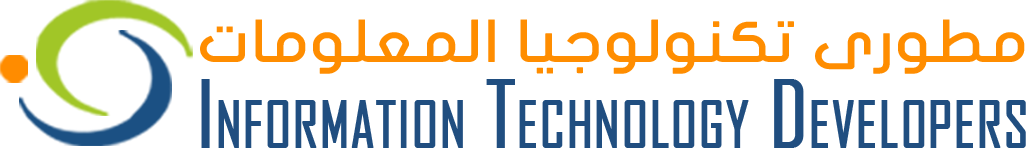
<style>
.page{position:relative;width:1030px;height:162px;background:#ffffff}
.page>*{position:absolute;margin:0}
.t1{font:56.4px "JFFlat-Medium";color:#ff8d00;font-variant:small-caps;scale:1.1 1}
.t2{font:88.8px "AgencyFB-Reg";color:#204e80;font-variant:small-caps;font-weight:bold;scale:0.95 1}
</style>
<div class="page">
<p class="t1" style="left:200px;top:19px;width:825px;height:55px">مطورى تكنولوجيا المعلومات</p>
<p class="t2" style="left:201px;top:79px;width:825px;height:69px">Information Technology Developers</p>
</div>
